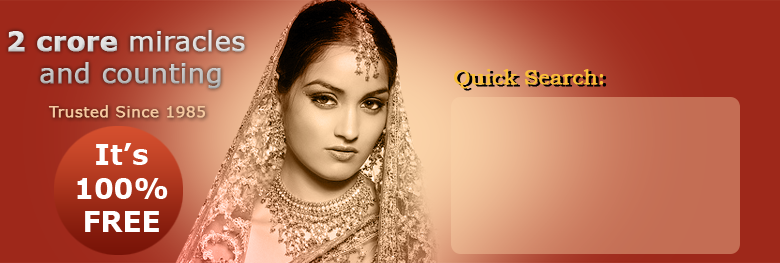
<style>
.page{position:relative;width:780px;height:263px}
.page>*{position:absolute;margin:0}
.t1{font:26.8px "Verdana";font-weight:bold}
.t2{font:26.8px "Verdana-Bold";font-weight:bold}
.t3{font:20.8px "BookmanOldStyle";color:#f9bf37;font-weight:bold}
.t4{font:20.8px "BookmanOldStyle";color:#000000;font-weight:bold}
.t5{font:15.5px "Verdana";color:#f5c9a0;font-weight:bold}
.t6{font:28px "Verdana-Bold";color:#ffffff}
</style>
<div class="page">
<p class="t1" style="left:8px;top:30px;width:237px;height:59px;text-align:center"><span class="t2">2 crore</span> miracles <br>and counting</p>
<p class="t3" style="left:454px;top:69px;width:150px;height:20px">Quick Search:</p>
<p class="t4" style="left:457px;top:71px;width:150px;height:20px">Quick Search:</p>
<p class="t5" style="left:48px;top:105px;width:158px;height:13px">Trusted Since 1985</p>
<p class="t6" style="left:77px;top:143px;width:91px;height:89px;text-align:center">It’s<br>100%<br>FREE</p>
</div>
